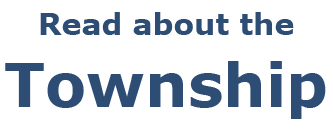
<style>
.page{position:relative;width:333px;height:134px;background:#ffffff}
.page>*{position:absolute;margin:0}
.t1{font:30px "Verdana-Bold";color:#2d4d74}
.t2{font:60px "Verdana-Bold";color:#2d4d74}
</style>
<div class="page">
<p class="t1" style="left:5px;top:12px;width:321px;height:107px;text-align:center">Read about the<br><span class="t2">Township</span></p>
</div>
